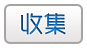
<style>
.page{position:relative;width:87px;height:48px;background:#ffffff}
.page>*{position:absolute;margin:0}
.t1{font:18px "RTWSYueGoTrial-Regula-yolan"}
</style>
<div class="page">
<p class="t1" style="left:21px;top:13px;width:45px;height:22px">收集</p>
</div>
